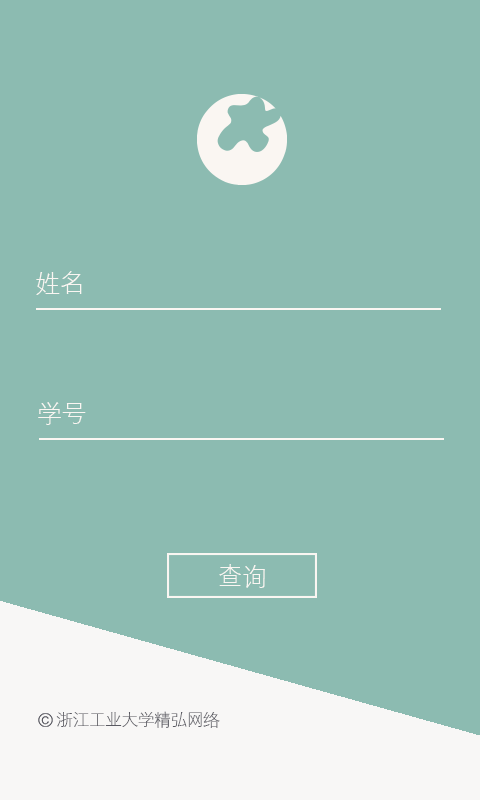
<style>
.page{position:relative;width:480px;height:800px;background:#8cbbb1}
.page>*{position:absolute;margin:0}
.t1{font:25px "DengXian-Light";letter-spacing:-0.02em;color:#faf6f2}
.t2{font:16.7px "DengXian-Light";letter-spacing:-0.02em;color:#5a5a62}
</style>
<div class="page">
<p class="t1" style="left:36px;top:271px;width:46px;height:24px">姓名</p>
<p class="t1" style="left:38px;top:402px;width:48px;height:23px">学号</p>
<p class="t1" style="left:219px;top:564px;width:46px;height:24px">查询</p>
<p class="t2" style="left:56px;top:711px;width:164px;height:17px">浙江工业大学精弘网络</p>
</div>
